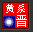
<style>
.page{position:relative;width:33px;height:32px;background:#f20000}
.page>*{position:absolute;margin:0}
.t1{font:10.4px "SimSun";color:#ffffff}
.t2{font:11.7px "SimSun";color:#ffffff}
</style>
<div class="page">
<p class="t1" style="left:6px;top:4px;width:19px;height:9px">黄系</p>
<p class="t2" style="left:16px;top:15px;width:11px;height:12px">晋</p>
</div>
